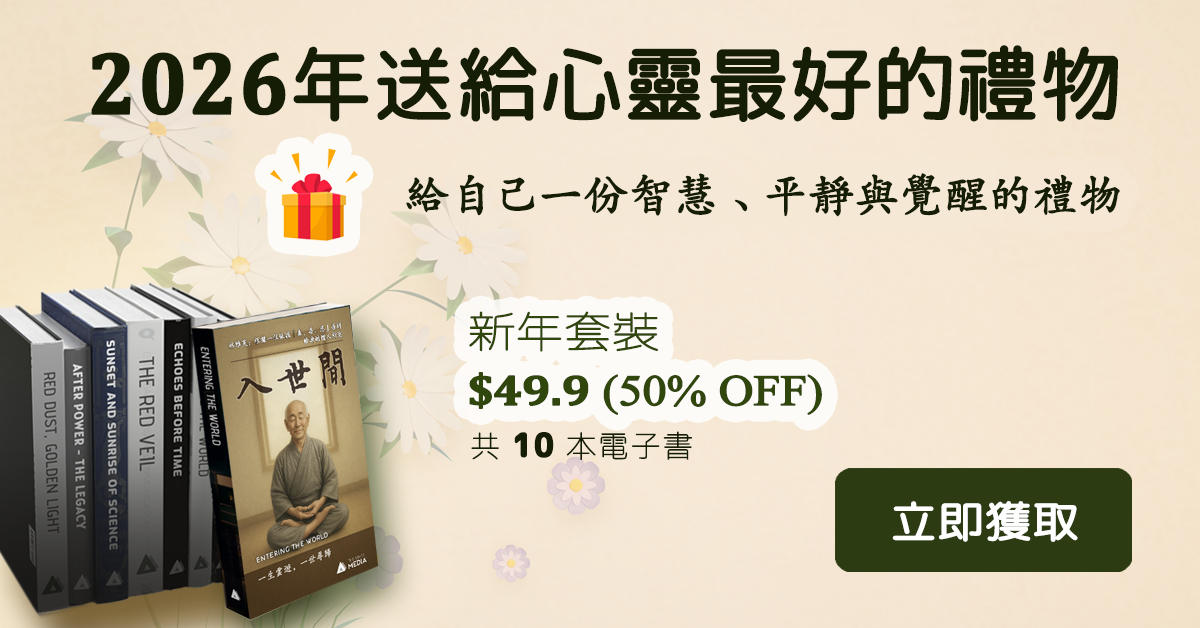
<style>
.page{position:relative;width:1200px;height:628px}
.page>*{position:absolute;margin:0}
.t1{font:80.4px "RoundedMplus1c-Regular";letter-spacing:0.01em;color:#151e05;font-weight:bold}
.t2{font:88.4px "Cambria-Bold";letter-spacing:0.01em;color:#151e05;font-weight:bold;scale:0.91 1}
.t3{font:44px "CN-Khai3.0";letter-spacing:-0.005em;color:#151e05;font-weight:bold}
.t4{font:43.2px/57.6px "TimesNewRomanPSMT";letter-spacing:-0.025em;color:#31460c;font-weight:bold;scale:1.11 1}
.t5{font:43.2px/57.6px "RoundedMplus1c-Thin";letter-spacing:-0.025em;color:#31460c;font-weight:bold;scale:1.11 1}
.t6{font:43.2px/57.6px "Cambria-Bold";letter-spacing:-0.025em;color:#31460c;font-weight:bold;scale:1.11 1}
.t7{font:30px "RoundedMplus1c-Thin";letter-spacing:0.05em;color:#151e05;font-weight:bold}
.t8{font:33px "RoundedMplus1c-ExtraBold";letter-spacing:0.05em;color:#151e05;font-weight:bold;scale:0.91 1}
.t9{font:43.2px "RoundedMplus1c-Regular";letter-spacing:0.01em;color:#ffffff;font-weight:bold;scale:1.06 1}
</style>
<div class="page">
<p class="t1" style="left:91px;top:45px;width:1027px;height:77px"><span class="t2">2026</span>年送給心靈最好的禮物</p>
<p class="t3" style="left:406px;top:173px;width:714px;height:44px">給自己一份智慧、平靜與覺醒的禮物</p>
<p class="t4" style="left:469px;top:311px;width:353px;height:104px"><span class="t5">新年套裝<br></span><span class="t6">$49.9</span> (50% OFF)</p>
<p class="t7" style="left:471px;top:431px;width:221px;height:29px">共 <span class="t8">10</span> 本電子書</p>
<p class="t9" style="left:892px;top:501px;width:186px;height:41px">立即獲取</p>
</div>
